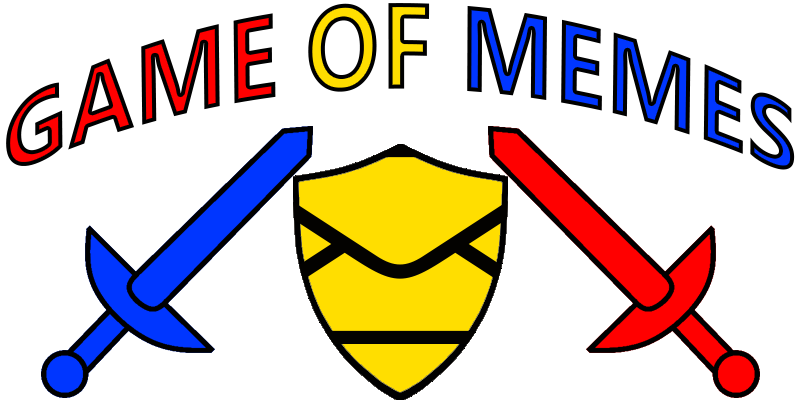
<style>
.page{position:relative;width:800px;height:400px;background:#ffffff}
.page>*{position:absolute;margin:0}
.t1{font:95.8px "NirmalaUI-Bold"}
</style>
<div class="page">
<p class="t1" style="left:6px;top:3px;width:789px;height:167px;text-align:center">GAME OF MEMES</p>
</div>
